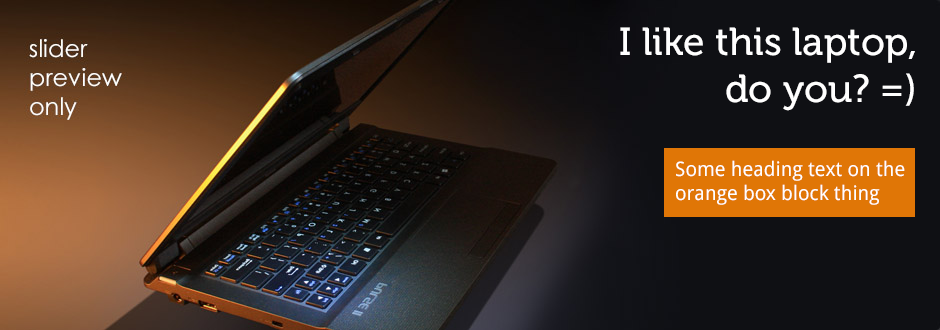
<style>
.page{position:relative;width:940px;height:330px;background:#0f1014}
.page>*{position:absolute;margin:0}
.t1{font:39px "Museo-500";color:#ffffff}
.t2{font:20px "DroidSans";color:#ffffff}
</style>
<div class="page">
<p class="t1" style="left:620px;top:27px;width:295px;height:84px;text-align:right">I like this laptop,<br>do you? =)</p>
<p class="t2" style="left:676px;top:160px;width:229px;height:45px">Some heading text on the<br>orange box block thing</p>
</div>
